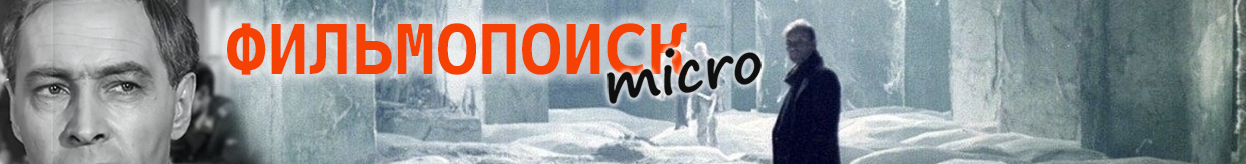
<style>
.page{position:relative;width:1246px;height:164px}
.page>*{position:absolute;margin:0}
.t1{font:72px "CascadiaCodeRoman-Bold";color:#f54204}
</style>
<div class="page">
<p class="t1" style="left:227px;top:23px;width:461px;height:52px">ФИЛЬМОПОИСК</p>
</div>
